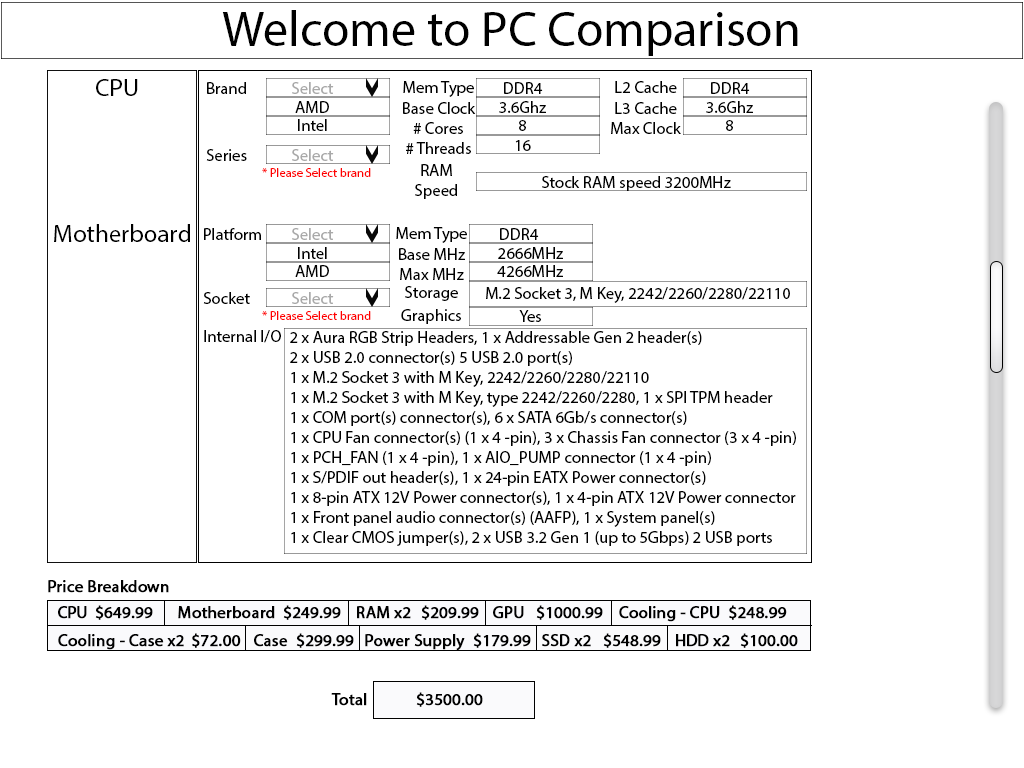
<style>
.page{position:relative;width:1024px;height:768px;background:#ffffff}
.page>*{position:absolute;margin:0}
.t1{font:50px "MyriadPro-Regular";color:#000000}
.t2{font:25px "MyriadPro-Regular";color:#000000}
.t3{font:16.7px "MyriadPro-Regular";color:#000000}
.t4{font:16.7px "MyriadPro-Regular";color:#a9a9a9}
.t5{font:12.5px "MyriadPro-Regular";color:#ff0000}
.t6{font:16.7px "MyriadPro-Regular";color:#000000;font-weight:bold}
</style>
<div class="page">
<p class="t1" style="left:222px;top:10px;width:576px;height:46px">Welcome to PC Comparison</p>
<p class="t2" style="left:96px;top:79px;width:42px;height:17px">CPU</p>
<p class="t3" style="left:207px;top:82px;width:39px;height:12px">Brand</p>
<p class="t4" style="left:292px;top:82px;width:42px;height:12px">Select</p>
<p class="t3" style="left:403px;top:81px;width:71px;height:16px">Mem Type</p>
<p class="t3" style="left:504px;top:82px;width:39px;height:12px">DDR4</p>
<p class="t3" style="left:615px;top:81px;width:62px;height:12px">L2 Cache</p>
<p class="t3" style="left:711px;top:82px;width:39px;height:12px">DDR4</p>
<p class="t3" style="left:295px;top:101px;width:34px;height:12px">AMD</p>
<p class="t3" style="left:403px;top:102px;width:73px;height:12px">Base Clock</p>
<p class="t3" style="left:499px;top:101px;width:47px;height:12px">3.6Ghz</p>
<p class="t3" style="left:615px;top:102px;width:62px;height:12px">L3 Cache</p>
<p class="t3" style="left:706px;top:101px;width:47px;height:12px">3.6Ghz</p>
<p class="t3" style="left:298px;top:119px;width:29px;height:12px">Intel</p>
<p class="t3" style="left:413px;top:122px;width:50px;height:12px"># Cores</p>
<p class="t3" style="left:519px;top:120px;width:7px;height:11px">8</p>
<p class="t3" style="left:611px;top:122px;width:70px;height:12px">Max Clock</p>
<p class="t3" style="left:726px;top:120px;width:7px;height:11px">8</p>
<p class="t3" style="left:206px;top:149px;width:41px;height:12px">Series</p>
<p class="t4" style="left:292px;top:149px;width:42px;height:12px">Select</p>
<p class="t3" style="left:406px;top:142px;width:65px;height:12px"># Threads</p>
<p class="t3" style="left:515px;top:140px;width:16px;height:11px">16</p>
<p class="t5" style="left:262px;top:168px;width:109px;height:9px">* Please Select brand</p>
<p class="t3" style="left:415px;top:164px;width:42px;height:35px;text-align:center">RAM<br>Speed</p>
<p class="t3" style="left:542px;top:176px;width:189px;height:15px">Stock RAM speed 3200MHz</p>
<p class="t2" style="left:54px;top:224px;width:136px;height:18px">Motherboard</p>
<p class="t3" style="left:204px;top:228px;width:57px;height:12px">Platform</p>
<p class="t4" style="left:292px;top:228px;width:42px;height:12px">Select</p>
<p class="t3" style="left:396px;top:227px;width:71px;height:16px">Mem Type</p>
<p class="t3" style="left:500px;top:228px;width:39px;height:12px">DDR4</p>
<p class="t3" style="left:298px;top:247px;width:29px;height:12px">Intel</p>
<p class="t3" style="left:399px;top:248px;width:66px;height:12px">Base MHz</p>
<p class="t3" style="left:498px;top:247px;width:65px;height:12px">2666MHz</p>
<p class="t3" style="left:295px;top:265px;width:34px;height:12px">AMD</p>
<p class="t3" style="left:400px;top:268px;width:64px;height:12px">Max MHz</p>
<p class="t3" style="left:497px;top:265px;width:66px;height:12px">4266MHz</p>
<p class="t3" style="left:203px;top:292px;width:47px;height:12px">Socket</p>
<p class="t4" style="left:292px;top:292px;width:42px;height:12px">Select</p>
<p class="t3" style="left:405px;top:286px;width:53px;height:15px">Storage</p>
<p class="t3" style="left:486px;top:287px;width:304px;height:16px">M.2 Socket 3, M Key, 2242/2260/2280/22110</p>
<p class="t5" style="left:262px;top:311px;width:109px;height:9px">* Please Select brand</p>
<p class="t3" style="left:401px;top:309px;width:60px;height:15px">Graphics</p>
<p class="t3" style="left:519px;top:310px;width:22px;height:12px">Yes</p>
<p class="t3" style="left:204px;top:330px;width:77px;height:13px">Internal I/O</p>
<p class="t3" style="left:290px;top:331px;width:506px;height:215px">2 x Aura RGB Strip Headers, 1 x Addressable Gen 2 header(s)<br>2 x USB 2.0 connector(s) 5 USB 2.0 port(s)<br>1 x M.2 Socket 3 with M Key, 2242/2260/2280/22110<br>1 x M.2 Socket 3 with M Key, type 2242/2260/2280, 1 x SPI TPM header<br>1 x COM port(s) connector(s), 6 x SATA 6Gb/s connector(s)<br>1 x CPU Fan connector(s) (1 x 4 -pin), 3 x Chassis Fan connector (3 x 4 -pin)<br>1 x PCH_FAN (1 x 4 -pin), 1 x AIO_PUMP connector (1 x 4 -pin)<br>1 x S/PDIF out header(s), 1 x 24-pin EATX Power connector(s)<br>1 x 8-pin ATX 12V Power connector(s), 1 x 4-pin ATX 12V Power connector<br>1 x Front panel audio connector(s) (AAFP), 1 x System panel(s)<br>1 x Clear CMOS jumper(s), 2 x USB 3.2 Gen 1 (up to 5Gbps) 2 USB ports</p>
<p class="t6" style="left:48px;top:580px;width:121px;height:13px">Price Breakdown</p>
<p class="t6" style="left:58px;top:606px;width:29px;height:13px">CPU</p>
<p class="t6" style="left:95px;top:605px;width:58px;height:15px">$649.99</p>
<p class="t6" style="left:178px;top:606px;width:97px;height:13px">Motherboard</p>
<p class="t6" style="left:283px;top:605px;width:58px;height:15px">$249.99</p>
<p class="t6" style="left:357px;top:606px;width:54px;height:13px">RAM x2</p>
<p class="t6" style="left:421px;top:605px;width:58px;height:15px">$209.99</p>
<p class="t6" style="left:493px;top:606px;width:31px;height:13px">GPU</p>
<p class="t6" style="left:536px;top:605px;width:67px;height:15px">$1000.99</p>
<p class="t6" style="left:619px;top:606px;width:101px;height:16px">Cooling - CPU</p>
<p class="t6" style="left:729px;top:605px;width:58px;height:15px">$248.99</p>
<p class="t6" style="left:58px;top:634px;width:126px;height:16px">Cooling - Case x2</p>
<p class="t6" style="left:192px;top:633px;width:49px;height:15px">$72.00</p>
<p class="t6" style="left:254px;top:634px;width:34px;height:13px">Case</p>
<p class="t6" style="left:296px;top:633px;width:58px;height:15px">$299.99</p>
<p class="t6" style="left:365px;top:634px;width:100px;height:17px">Power Supply</p>
<p class="t6" style="left:473px;top:633px;width:58px;height:15px">$179.99</p>
<p class="t6" style="left:542px;top:634px;width:49px;height:13px">SSD x2</p>
<p class="t6" style="left:603px;top:633px;width:58px;height:15px">$548.99</p>
<p class="t6" style="left:676px;top:634px;width:54px;height:13px">HDD x2</p>
<p class="t6" style="left:740px;top:633px;width:58px;height:15px">$100.00</p>
<p class="t6" style="left:331px;top:693px;width:36px;height:13px">Total</p>
<p class="t6" style="left:416px;top:692px;width:67px;height:15px">$3500.00</p>
</div>
